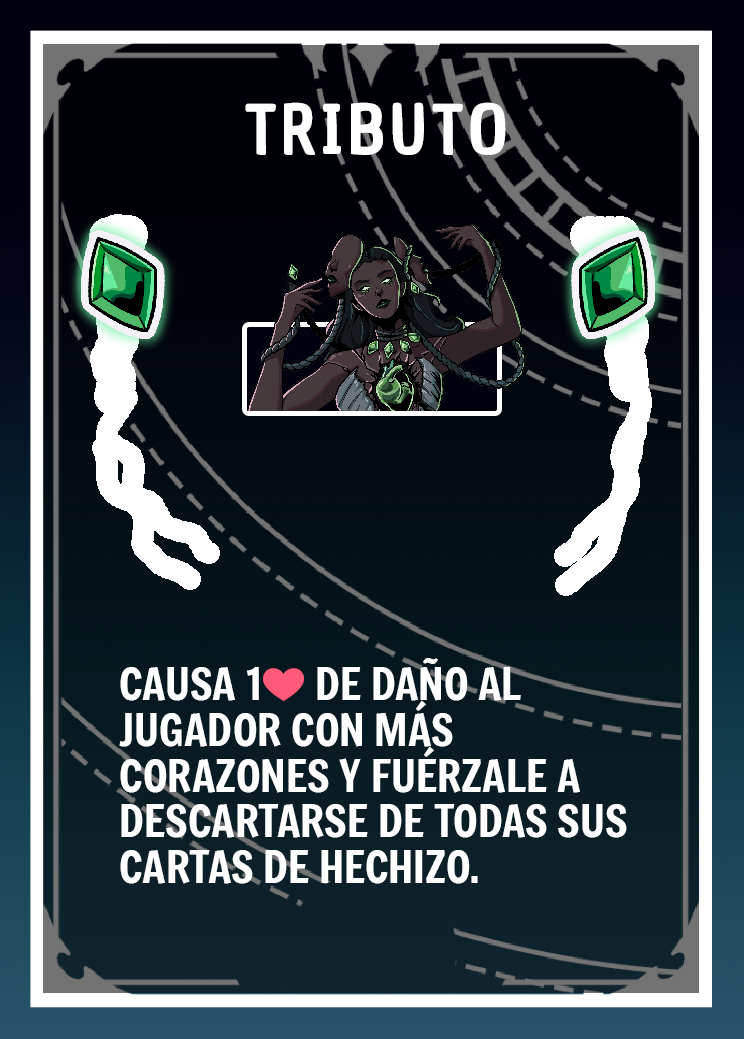
<style>
.page{position:relative;width:744px;height:1039px}
.page>*{position:absolute;margin:0}
.t1{font:66.7px "ChauPhilomeneOne-Regular";letter-spacing:0.075em;color:#ffffff}
.t2{font:43.7px/45.8px "Freeman-Regular";color:#ffffff}
.t3{font:43.7px/45.8px "EmojiOneColor";color:#ffffff}
</style>
<div class="page">
<p class="t1" style="left:245px;top:102px;width:261px;height:53px">TRIBUTO</p>
<p class="t2" style="left:119px;top:658px;width:508px;height:226px">CAUSA 1<span class="t3">❤️</span> DE DAÑO AL JUGADOR CON MÁS CORAZONES Y FUÉRZALE A DESCARTARSE DE TODAS SUS CARTAS DE HECHIZO.</p>
</div>
